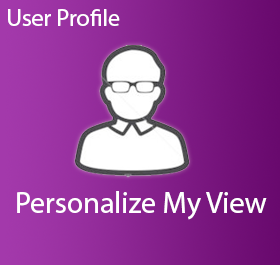
<style>
.page{position:relative;width:280px;height:265px}
.page>*{position:absolute;margin:0}
.t1{font:24px "MyriadHebrew-Regular";color:#ffffff}
.t2{font:30px "MyriadHebrew-Regular";color:#ffffff}
</style>
<div class="page">
<p class="t1" style="left:8px;top:9px;width:112px;height:17px">User Profile</p>
<p class="t2" style="left:17px;top:191px;width:250px;height:29px">Personalize My View</p>
</div>
